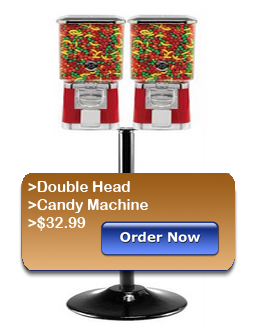
<style>
.page{position:relative;width:254px;height:327px;background:#ffffff}
.page>*{position:absolute;margin:0}
.t1{font:15px "ArialRoundedMTBold";color:#ffffff}
</style>
<div class="page">
<p class="t1" style="left:28px;top:181px;width:120px;height:50px">&gt;Double Head<br>&gt;Candy Machine<br>&gt;$32.99</p>
</div>
